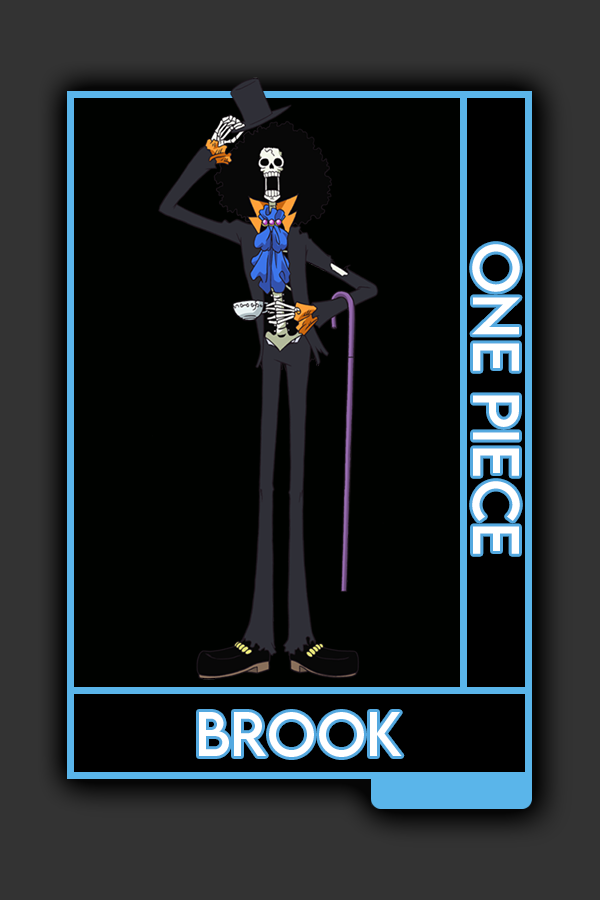
<style>
.page{position:relative;width:600px;height:900px;background:#000200}
.page>*{position:absolute;margin:0}
.t1{font:58.4px "LEMONMILK-Regular";color:#ffffff}
.t2{font:55.4px "LEMONMILK-Regular";color:#ffffff}
</style>
<div class="page">
<p class="t1" style="left:472px;top:244px;width:48px;height:310px;rotate:90deg">One Piece</p>
<p class="t2" style="left:199px;top:712px;width:203px;height:45px">Brook</p>
</div>
